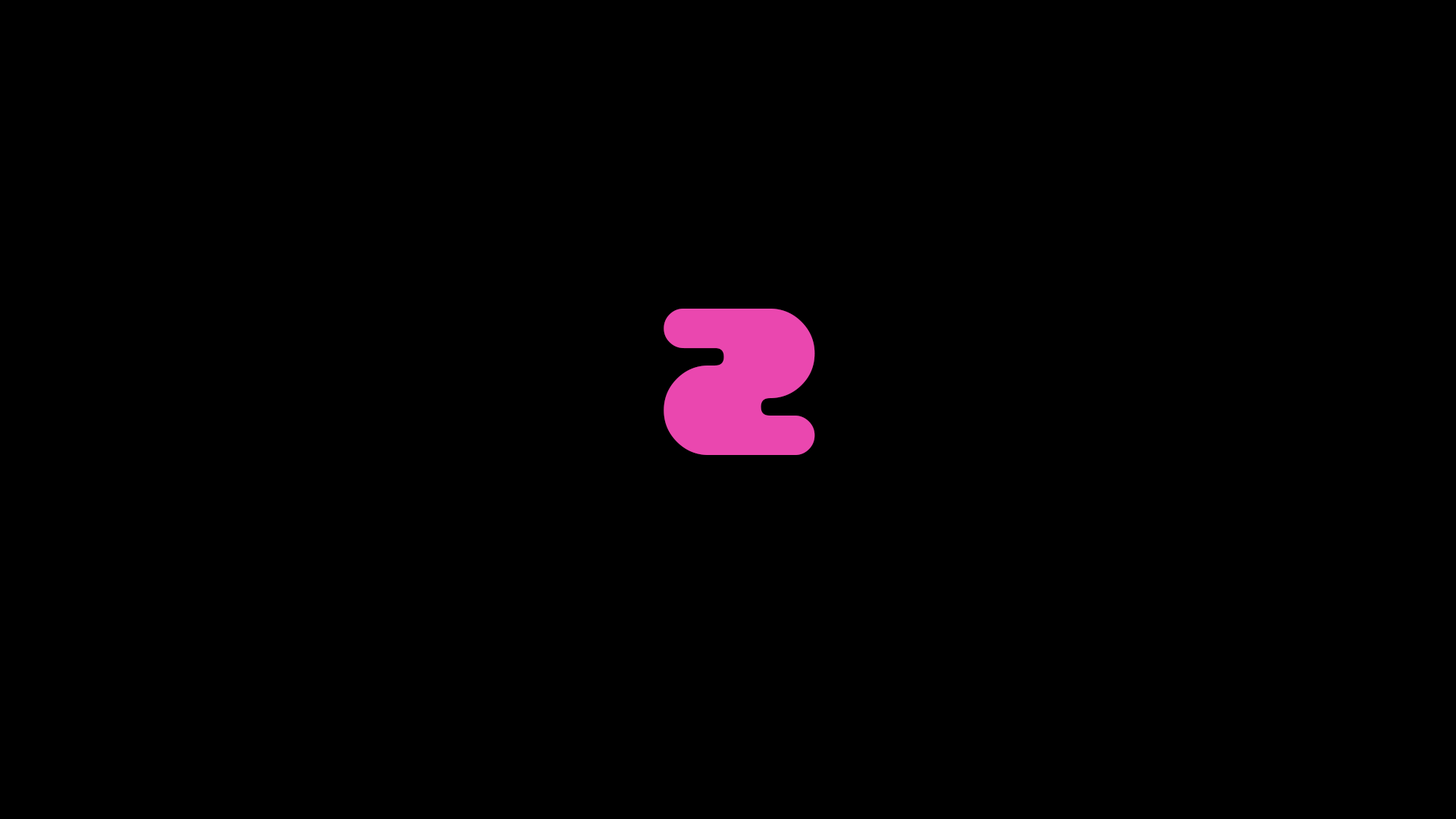
<style>
.page{position:relative;width:1456px;height:819px;background:#000000}
.page>*{position:absolute;margin:0}
.t1{font:303.3px "Billo";color:#ea47af}
</style>
<div class="page">
<p class="t1" style="left:664px;top:309px;width:151px;height:146px">2</p>
</div>
